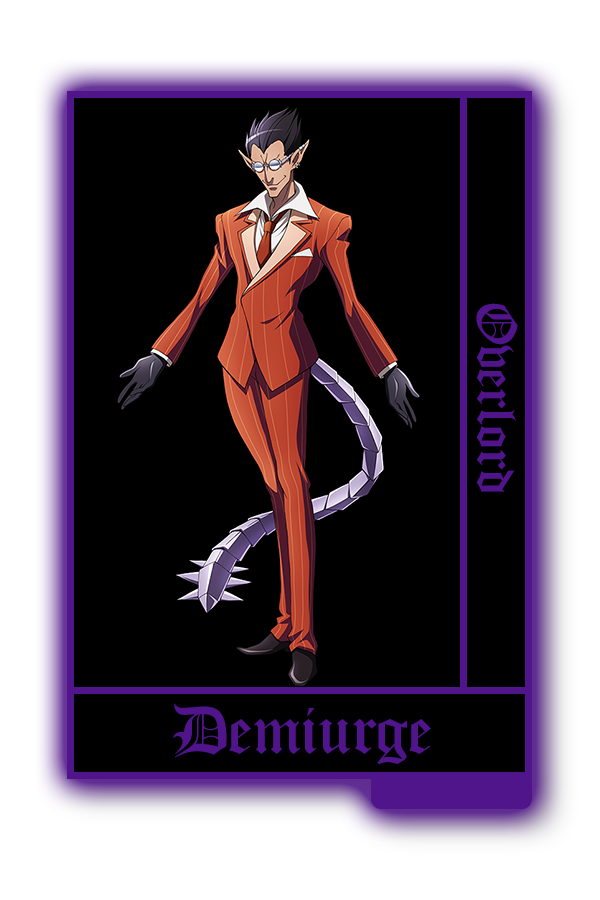
<style>
.page{position:relative;width:600px;height:900px;background:#000000}
.page>*{position:absolute;margin:0}
.t1{font:61.5px "OldLondon";color:#51158b}
.t2{font:75px "OldLondon";color:#51158b}
</style>
<div class="page">
<p class="t1" style="left:476px;top:303px;width:42px;height:189px;rotate:90deg">Overlord</p>
<p class="t2" style="left:173px;top:703px;width:258px;height:61px">Demiurge</p>
</div>
